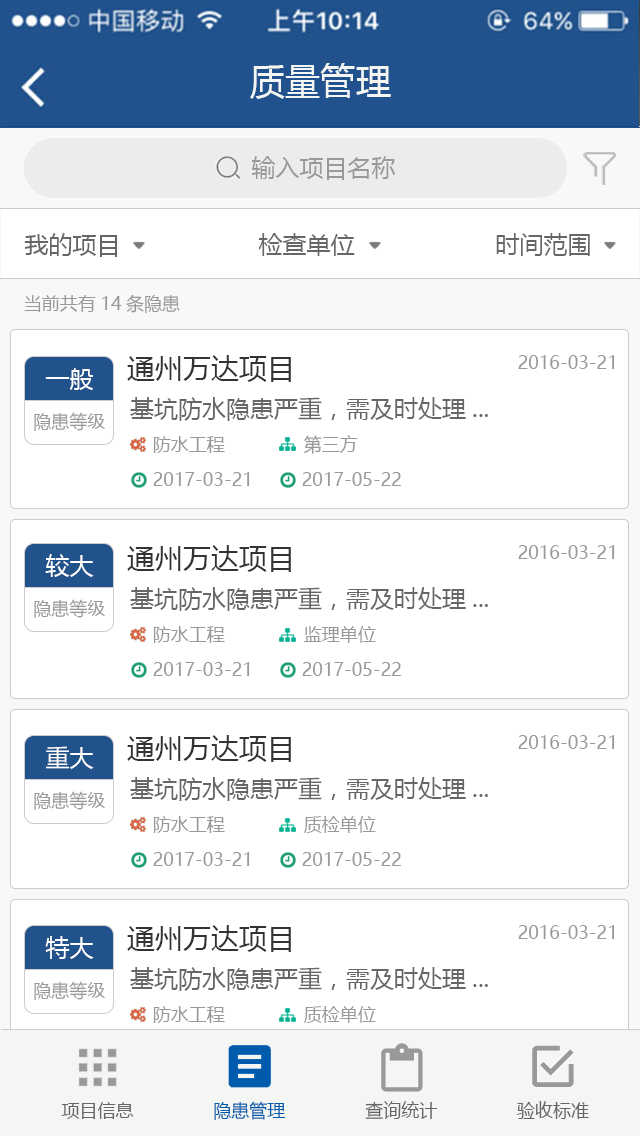
<style>
.page{position:relative;width:640px;height:1136px;background:#ffffff}
.page>*{position:absolute;margin:0}
.t1{font:36px "MicrosoftYaHei";color:#f3f6f3}
.t2{font:24px "MicrosoftYaHei";color:#999999}
.t3{font:24px "MicrosoftYaHei";color:#666666}
.t4{font:18px "MicrosoftYaHei";color:#999999}
.t5{font:28px "MicrosoftYaHei";color:#333333}
.t6{font:24px "MicrosoftYaHei";color:#ffffff}
.t7{font:18px "MicrosoftYaHei";color:#666666}
.t8{font:18px "MicrosoftYaHei";color:#005bac}
</style>
<div class="page">
<p class="t1" style="left:250px;top:63px;width:141px;height:36px">质量管理</p>
<p class="t2" style="left:251px;top:156px;width:144px;height:24px">输入项目名称</p>
<p class="t3" style="left:24px;top:233px;width:93px;height:24px">我的项目</p>
<p class="t3" style="left:258px;top:233px;width:97px;height:23px">检查单位</p>
<p class="t3" style="left:496px;top:233px;width:94px;height:23px">时间范围</p>
<p class="t4" style="left:24px;top:294px;width:156px;height:19px">当前共有14条隐患</p>
<p class="t5" style="left:127px;top:355px;width:164px;height:27px">通州万达项目</p>
<p class="t4" style="left:518px;top:355px;width:97px;height:14px">2016-03-21</p>
<p class="t6" style="left:45px;top:368px;width:48px;height:22px">一般</p>
<p class="t3" style="left:130px;top:397px;width:358px;height:24px">基坑防水隐患严重，需及时处理...</p>
<p class="t4" style="left:34px;top:412px;width:72px;height:19px">隐患等级</p>
<p class="t4" style="left:153px;top:436px;width:72px;height:17px">防水工程</p>
<p class="t4" style="left:303px;top:435px;width:55px;height:19px">第三方</p>
<p class="t4" style="left:153px;top:472px;width:97px;height:14px">2017-03-21</p>
<p class="t4" style="left:302px;top:472px;width:99px;height:14px">2017-05-22</p>
<p class="t5" style="left:127px;top:545px;width:164px;height:27px">通州万达项目</p>
<p class="t4" style="left:518px;top:545px;width:97px;height:14px">2016-03-21</p>
<p class="t6" style="left:45px;top:554px;width:49px;height:23px">较大</p>
<p class="t3" style="left:130px;top:587px;width:358px;height:24px">基坑防水隐患严重，需及时处理...</p>
<p class="t4" style="left:34px;top:599px;width:72px;height:19px">隐患等级</p>
<p class="t4" style="left:153px;top:626px;width:72px;height:17px">防水工程</p>
<p class="t4" style="left:304px;top:626px;width:72px;height:17px">监理单位</p>
<p class="t4" style="left:153px;top:662px;width:97px;height:14px">2017-03-21</p>
<p class="t4" style="left:302px;top:662px;width:99px;height:14px">2017-05-22</p>
<p class="t5" style="left:127px;top:735px;width:164px;height:27px">通州万达项目</p>
<p class="t4" style="left:518px;top:735px;width:97px;height:14px">2016-03-21</p>
<p class="t6" style="left:46px;top:746px;width:48px;height:23px">重大</p>
<p class="t3" style="left:130px;top:777px;width:358px;height:24px">基坑防水隐患严重，需及时处理...</p>
<p class="t4" style="left:34px;top:791px;width:72px;height:19px">隐患等级</p>
<p class="t4" style="left:153px;top:816px;width:72px;height:17px">防水工程</p>
<p class="t4" style="left:303px;top:816px;width:73px;height:17px">质检单位</p>
<p class="t4" style="left:153px;top:852px;width:97px;height:14px">2017-03-21</p>
<p class="t4" style="left:302px;top:852px;width:99px;height:14px">2017-05-22</p>
<p class="t5" style="left:127px;top:925px;width:164px;height:27px">通州万达项目</p>
<p class="t4" style="left:518px;top:925px;width:97px;height:14px">2016-03-21</p>
<p class="t6" style="left:45px;top:936px;width:49px;height:23px">特大</p>
<p class="t3" style="left:130px;top:967px;width:358px;height:24px">基坑防水隐患严重，需及时处理...</p>
<p class="t4" style="left:34px;top:981px;width:72px;height:19px">隐患等级</p>
<p class="t4" style="left:153px;top:1006px;width:72px;height:17px">防水工程</p>
<p class="t4" style="left:303px;top:1006px;width:73px;height:17px">质检单位</p>
<p class="t7" style="left:61px;top:1101px;width:528px;height:19px">项目信息               <span class="t8">隐患管理</span>               查询统计               验收标准</p>
</div>
